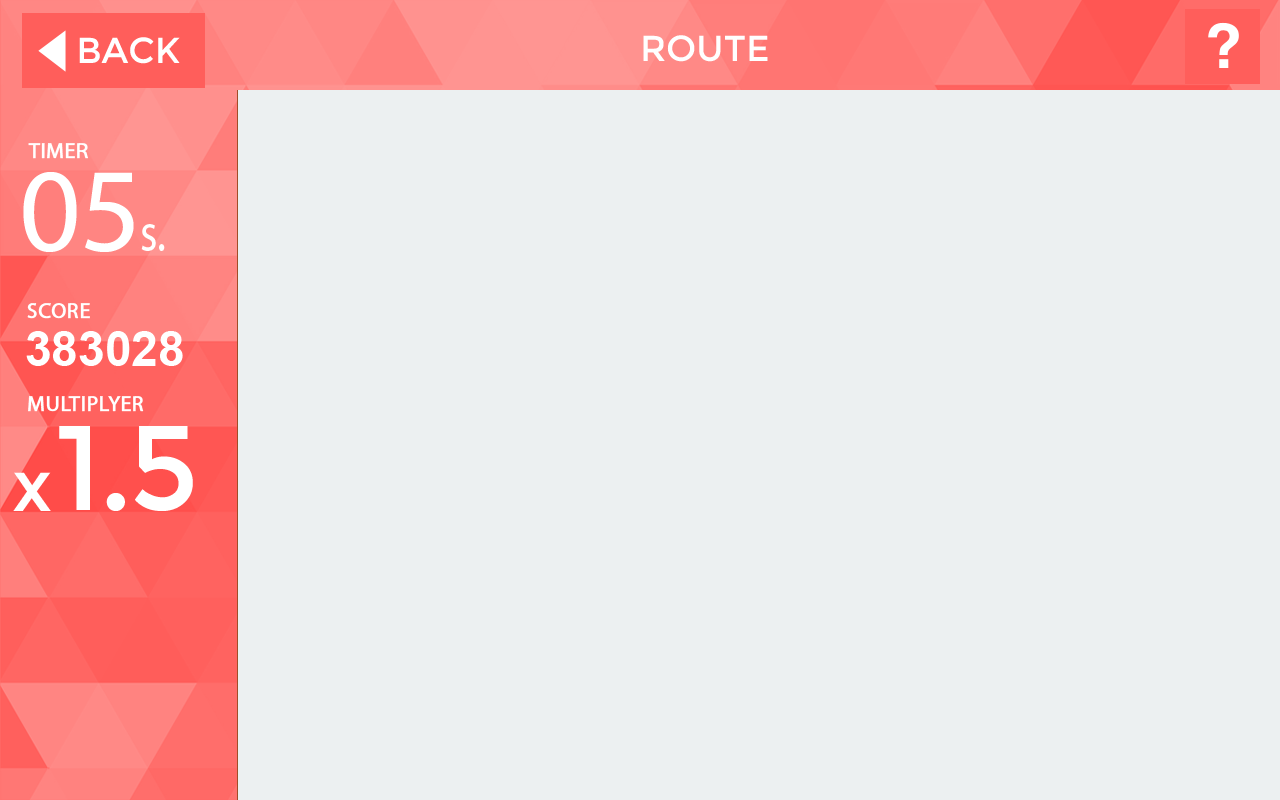
<style>
.page{position:relative;width:1280px;height:800px;background:#ecf0f1}
.page>*{position:absolute;margin:0}
.t1{font:36px "Montserrat-Regular";color:#ffffff}
.t2{font:36px "Montserrat-Regular";color:#ffffff;text-transform:uppercase}
.t3{font:22px "MyriadPro-Regular";color:#ffffff;font-weight:bold}
.t4{font:120px "MyriadPro-Regular";color:#ffffff}
.t5{font:55px "MyriadPro-Regular";color:#ffffff;scale:0.8 1}
.t6{font:48px "Arial-BoldMT";color:#ffffff}
.t7{font:120px "Montserrat-Regular";letter-spacing:-0.025em;color:#ffffff}
.t8{font:72px "Montserrat-Regular";color:#ffffff}
</style>
<div class="page">
<p class="t1" style="left:79px;top:37px;width:101px;height:27px">BACK</p>
<p class="t2" style="left:643px;top:35px;width:125px;height:27px">Route</p>
<p class="t3" style="left:28px;top:143px;width:60px;height:16px">TIMER</p>
<p class="t4" style="left:23px;top:172px;width:111px;height:80px">05</p>
<p class="t5" style="left:141px;top:224px;width:24px;height:27px">s.</p>
<p class="t3" style="left:27px;top:303px;width:63px;height:16px">SCORE</p>
<p class="t6" style="left:26px;top:331px;width:157px;height:35px">383028</p>
<p class="t3" style="left:28px;top:396px;width:116px;height:16px">MULTIPLYER</p>
<p class="t7" style="left:59px;top:426px;width:134px;height:85px">1.5</p>
<p class="t8" style="left:13px;top:472px;width:38px;height:39px">x</p>
</div>
